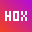
<style>
.page{position:relative;width:32px;height:32px}
.page>*{position:absolute;margin:0}
.t1{font:20px "Pixelzim-3x5";letter-spacing:-0.1em;color:#ffffff;text-transform:uppercase}
</style>
<div class="page">
<p class="t1" style="left:5px;top:11px;width:22px;height:10px">hox</p>
</div>
